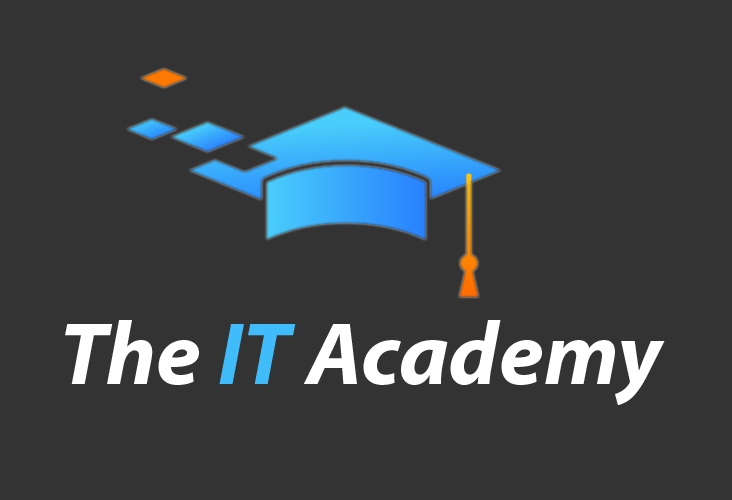
<style>
.page{position:relative;width:732px;height:500px;background:#333333}
.page>*{position:absolute;margin:0}
.t1{font:89.8px "MyriadPro-BoldIt";color:#ffffff}
.t2{font:89.8px "MyriadPro-BoldIt";color:#41bcfb}
</style>
<div class="page">
<p class="t1" style="left:65px;top:320px;width:600px;height:85px">The <span class="t2">IT </span>Academy</p>
</div>
